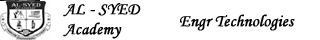
<style>
.page{position:relative;width:320px;height:40px;background:#ffffff}
.page>*{position:absolute;margin:0}
.t1{font:16.7px "MonotypeCorsiva";color:#030303;font-weight:bold}
</style>
<div class="page">
<p class="t1" style="left:63px;top:3px;width:78px;height:36px">AL - SYED <br>Academy</p>
<p class="t1" style="left:180px;top:14px;width:115px;height:17px">Engr Technologies</p>
</div>
